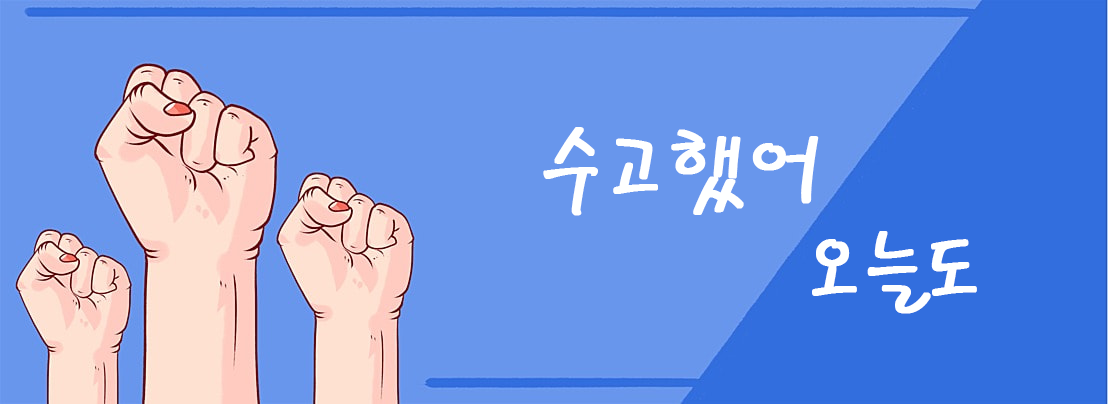
<style>
.page{position:relative;width:1108px;height:404px;background:#6896ec}
.page>*{position:absolute;margin:0}
.t1{font:91.9px "PyunjiR-HM";letter-spacing:-0.05em;color:#feffff;font-weight:bold}
</style>
<div class="page">
<p class="t1" style="left:543px;top:127px;width:276px;height:89px">수고했어</p>
<p class="t1" style="left:812px;top:231px;width:165px;height:83px">오늘도</p>
</div>
